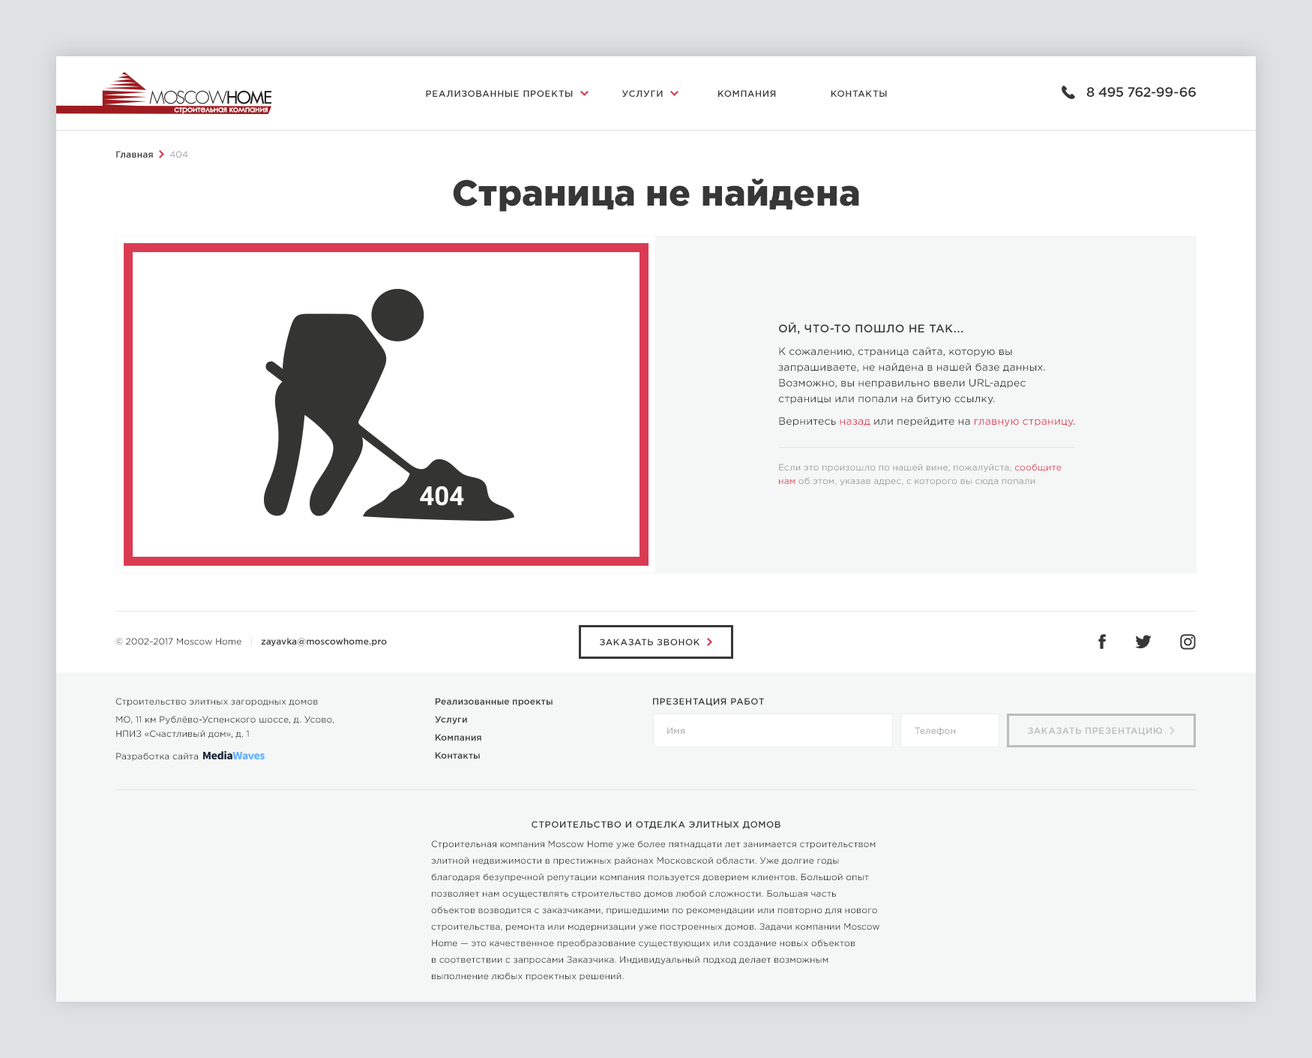
<style>
.page{position:relative;width:1312px;height:1058px;background:#ffffff}
.page>*{position:absolute;margin:0}
.t1{font:13.5px "GothamPro-Medium";letter-spacing:-0.025em;color:#373737}
.t2{font:9px "GothamPro-Medium";letter-spacing:0.05em;color:#373737;text-transform:uppercase}
.t3{font:9px "GothamPro-Medium";color:#373737}
.t4{font:9px "GothamPro";color:#999999}
.t5{font:36px "GothamPro-Black";color:#373737}
.t6{font:11.2px "GothamPro-Medium";letter-spacing:0.03em;color:#373737;text-transform:uppercase}
.t7{font:10.5px/15.8px "GothamPro";color:#373737}
.t8{font:10.5px/22.5px "GothamPro";color:#373737}
.t9{font:10.5px/22.5px "GothamPro";color:#da3b53}
.t10{font:9px/13.5px "GothamPro";color:#999999}
.t11{font:9px/15.8px "GothamPro";color:#999999}
.t12{font:9px/15.8px "GothamPro";color:#da3b53}
.t13{font:9px/13.5px "GothamPro";color:#da3b53}
.t14{font:9px "GothamPro";color:#373737}
.t15{font:9px "GothamPro-Medium";color:#dfe1e2}
.t16{font:9px/18px "GothamPro";color:#373737}
.t17{font:9px/14.2px "GothamPro";color:#373737}
.t18{font:9px/22.5px "GothamPro";color:#373737}
.t19{font:9px/18px "GothamPro-Medium";color:#373737}
.t20{font:9px "GothamPro";color:#aeaeae}
.t21{font:9px "GothamPro-Medium";letter-spacing:0.05em;color:#bcbcbc;text-transform:uppercase}
.t22{font:9px/16.5px "GothamPro";color:#373737}
.t23{font:9px/18px "GothamPro-Medium";letter-spacing:0.05em;color:#373737;text-transform:uppercase}
.t24{font:9px/19.5px "GothamPro";color:#373737}
</style>
<div class="page">
<p class="t1" style="left:1087px;top:87px;width:109px;height:10px">8 495 762-99-66</p>
<p class="t2" style="left:426px;top:90px;width:461px;height:7px">Реализованные проекты                  Услуги                    Компания                    Контакты</p>
<p class="t3" style="left:116px;top:151px;width:72px;height:7px">Главная      <span class="t4">404</span></p>
<p class="t5" style="left:453px;top:178px;width:407px;height:34px">Страница не найдена</p>
<p class="t6" style="left:779px;top:322px;width:185px;height:12px">Ой, Что-то пошло не так...</p>
<p class="t7" style="left:778px;top:346px;width:298px;height:81px">К сожалению, страница сайта, которую вы запрашиваете, не найдена в нашей базе данных. Возможно, вы неправильно ввели URL-адрес страницы или попали на битую ссылку.<br><span class="t8">Вернитесь </span><span class="t9">назад</span><span class="t8"> или перейдите на </span><span class="t9">главную страницу</span><span class="t8">.</span></p>
<p class="t10" style="left:779px;top:464px;width:283px;height:21px"><span class="t11">Если это произошло по нашей вине, пожалуйста, </span><span class="t12">сообщите </span><span class="t13">нам </span>об этом, указав адрес, с которого вы сюда попали</p>
<p class="t14" style="left:116px;top:637px;width:271px;height:9px">© 2002–2017 Moscow Home   <span class="t15">|</span><span class="t3">   zayavka@moscowhome.pro</span></p>
<p class="t2" style="left:600px;top:638px;width:100px;height:7px">Заказать звонок</p>
<p class="t16" style="left:116px;top:698px;width:218px;height:62px">Строительство элитных загородных домов<br>МО, 11 км Рублёво-Успенского шоссе, д. Усово,<br><span class="t17">НПИЗ «Счастливый дом», д. 1<br></span><span class="t18">Разработка сайта</span></p>
<p class="t19" style="left:435px;top:698px;width:118px;height:60px">Реализованные проекты<br>Услуги<br>Компания<br>Контакты</p>
<p class="t2" style="left:653px;top:698px;width:111px;height:8px">Презентация работ</p>
<p class="t20" style="left:668px;top:727px;width:18px;height:7px">Имя</p>
<p class="t20" style="left:915px;top:727px;width:41px;height:9px">Телефон</p>
<p class="t21" style="left:1028px;top:727px;width:134px;height:8px">Заказать презентацию</p>
<p class="t22" style="left:431px;top:820px;width:449px;height:160px;text-align:center"><span class="t23">Строительство и отделка элитных домов<br></span><span class="t24">Строительная компания Moscow Home уже более пятнадцати лет занимается строительством </span>элитной недвижимости в престижных районах Московской области. Уже долгие годы благодаря безупречной репутации компания пользуется доверием клиентов. Большой опыт позволяет нам осуществлять строительство домов любой сложности. Большая часть объектов возводится с заказчиками, пришедшими по рекомендации или повторно для нового строительства, ремонта или модернизации уже построенных домов. Задачи компании Moscow Home — это качественное преобразование существующих или создание новых объектов<br>в соответствии с запросами Заказчика. Индивидуальный подход делает возможным выполнение любых проектных решений.</p>
</div>
